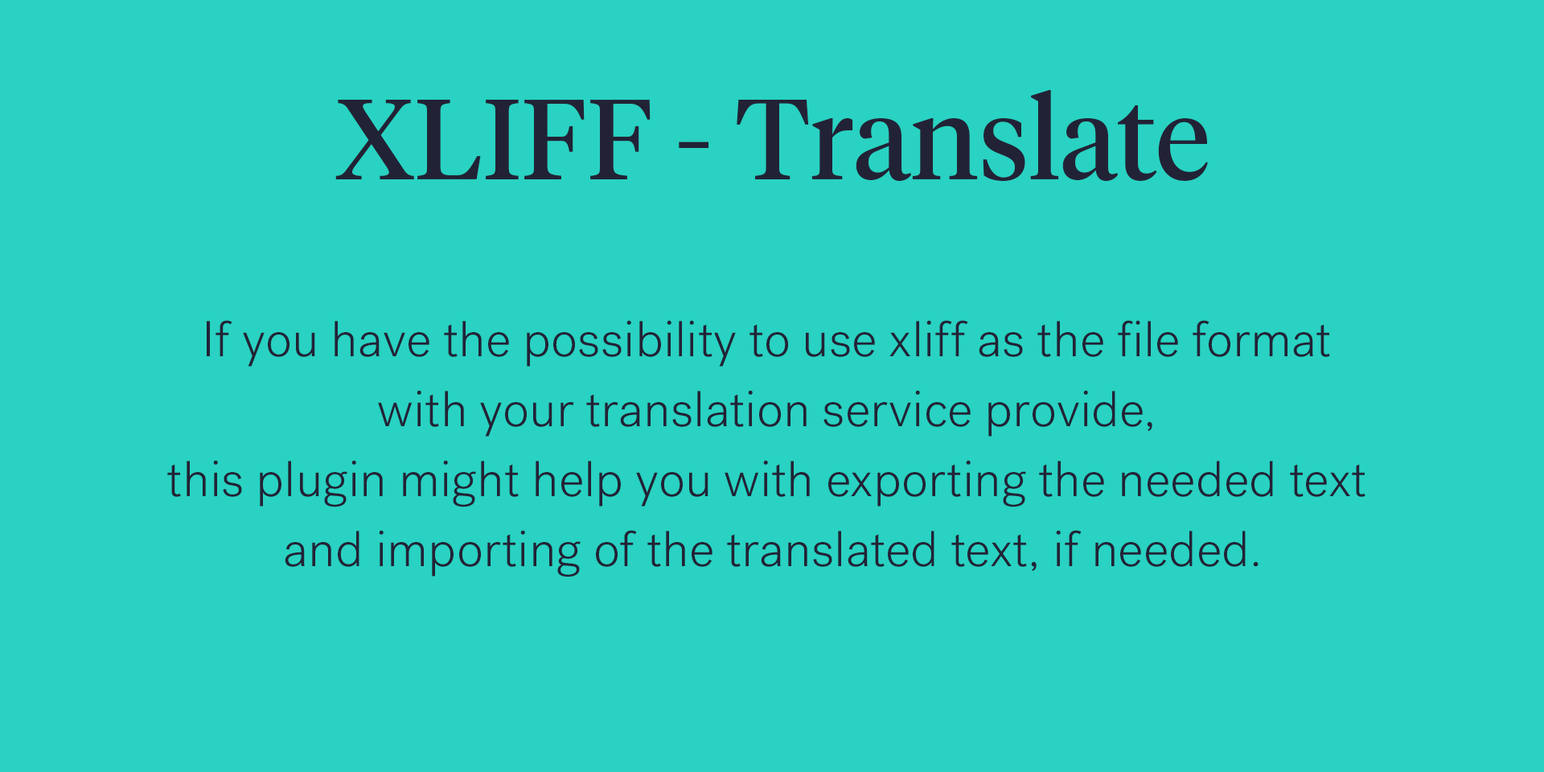
<style>
.page{position:relative;width:1544px;height:772px;background:#29d2c2}
.page>*{position:absolute;margin:0}
.t1{font:114px "TiemposHeadline-Regular";color:#222236}
.t2{font:50.2px/70px "PostGrotesk-Light";color:#222236}
</style>
<div class="page">
<p class="t1" style="left:335px;top:90px;width:873px;height:92px">XLIFF - Translate</p>
<p class="t2" style="left:167px;top:320px;width:1199px;height:258px;text-align:center">If you have the possibility to use xliff as the file format <br>with your translation service provide, <br>this plugin might help you with exporting the needed text <br>and importing of the translated text, if needed.</p>
</div>
